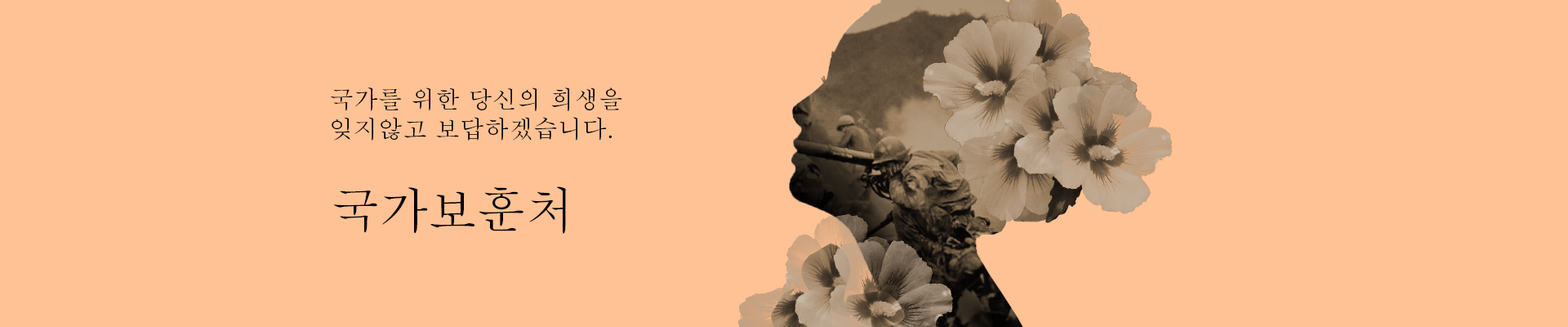
<style>
.page{position:relative;width:1568px;height:327px;background:#ffc295}
.page>*{position:absolute;margin:0}
.t1{font:24.5px "AdobeMyungjoStd-Medium";color:#000000}
.t2{font:49.2px "AdobeMyungjoStd-Medium";color:#000000}
</style>
<div class="page">
<p class="t1" style="left:331px;top:87px;width:291px;height:53px">국가를 위한 당신의 희생을<br>잊지않고 보답하겠습니다.</p>
<p class="t2" style="left:334px;top:186px;width:232px;height:48px">국가보훈처</p>
</div>
